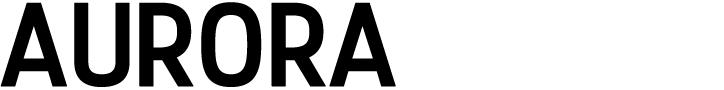
<style>
.page{position:relative;width:724px;height:90px;background:#ffffff}
.page>*{position:absolute;margin:0}
.t1{font:118.1px "Stellar-Medium";letter-spacing:-0.08em;color:#000000;text-transform:uppercase;font-weight:bold;scale:1.1 1}
</style>
<div class="page">
<p class="t1" style="left:0px;top:2px;width:396px;height:85px">AURORA</p>
</div>
